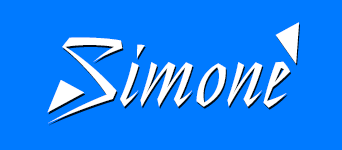
<style>
.page{position:relative;width:342px;height:150px;background:#007aff}
.page>*{position:absolute;margin:0}
.t1{font:304.5px "StillTime";letter-spacing:0.06em;color:#ffffff}
.t2{font:96.3px "StillTime";letter-spacing:0.06em;color:#ffffff}
.t3{font:304.4px "StillTime";letter-spacing:0.06em;color:#ffffff}
</style>
<div class="page">
<p class="t1" style="left:275px;top:22px;width:24px;height:42px;rotate:-30deg">.</p>
<p class="t2" style="left:48px;top:37px;width:242px;height:87px">Simone</p>
<p class="t3" style="left:47px;top:80px;width:37px;height:33px;rotate:27deg">.</p>
</div>
